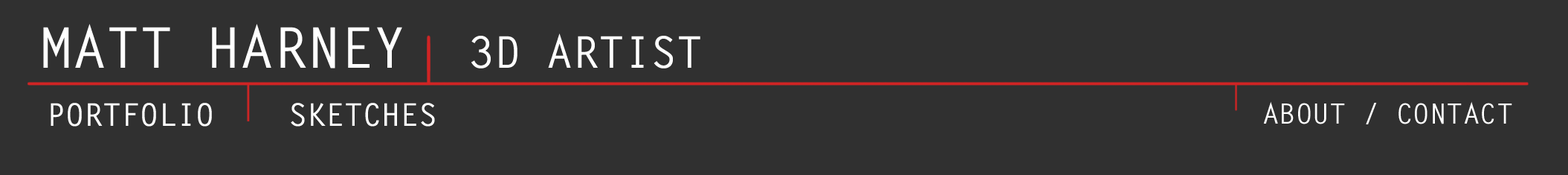
<style>
.page{position:relative;width:1568px;height:175px;background:#303030}
.page>*{position:absolute;margin:0}
.t1{font:43.4px "LetterGothicStd-Bold";color:#ffffff}
.t2{font:27.9px "LetterGothicStd-Bold";color:#ffffff}
.t3{font:31px "LetterGothicStd-Bold";color:#ffffff}
</style>
<div class="page">
<p class="t1" style="left:471px;top:33px;width:229px;height:35px">3D ARTIST</p>
<p class="t2" style="left:1263px;top:101px;width:249px;height:23px">ABOUT / CONTACT</p>
<p class="t3" style="left:51px;top:103px;width:384px;height:23px">PORTFOLIO    SKETCHES</p>
</div>
